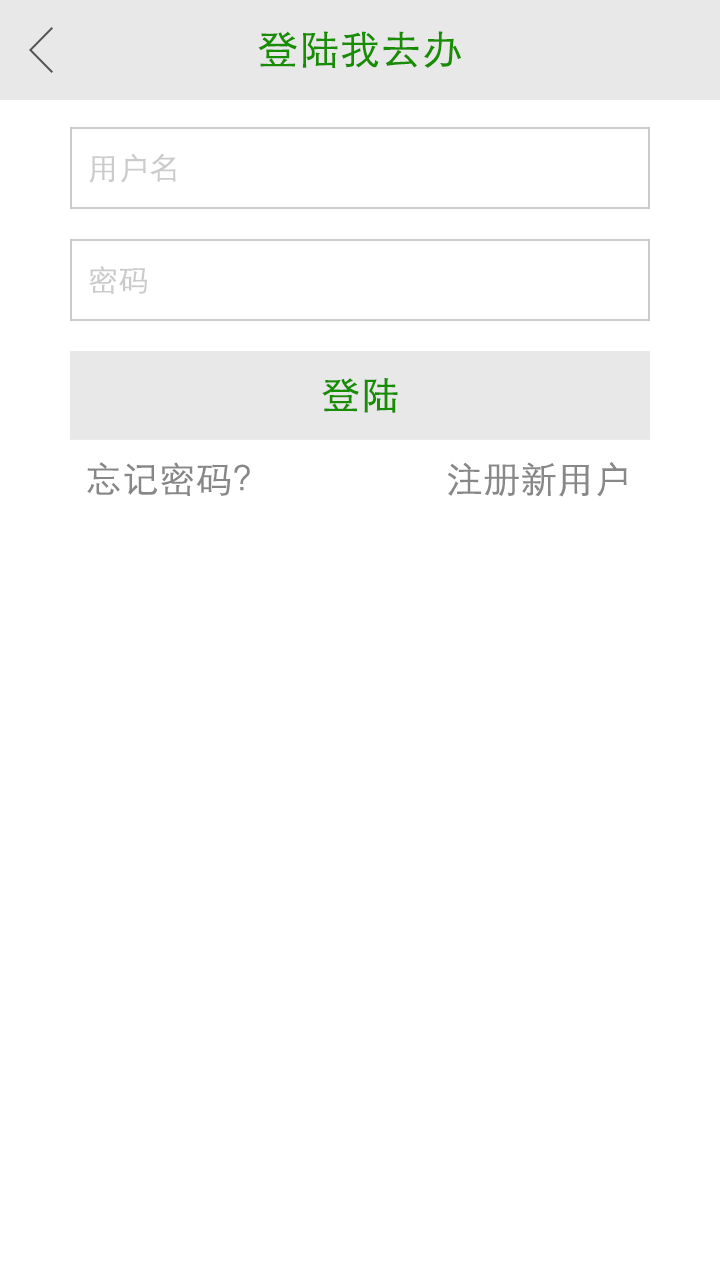
<style>
.page{position:relative;width:720px;height:1280px;background:#ffffff}
.page>*{position:absolute;margin:0}
.t1{font:40px "STXihei";color:#178d00;font-weight:bold}
.t2{font:30px "STXihei";color:#cbcbcb;font-weight:bold}
.t3{font:38px "STXihei";color:#178d00;font-weight:bold}
.t4{font:36px "STXihei";color:#878787;font-weight:bold}
.t5{font:36px "STXihei";color:#888888;font-weight:bold}
</style>
<div class="page">
<p class="t1" style="left:258px;top:31px;width:203px;height:37px">登陆我去办</p>
<p class="t2" style="left:89px;top:153px;width:87px;height:30px">用户名</p>
<p class="t2" style="left:89px;top:266px;width:58px;height:28px">密码</p>
<p class="t3" style="left:322px;top:378px;width:76px;height:35px">登陆</p>
<p class="t4" style="left:87px;top:462px;width:163px;height:34px">忘记密码？</p>
<p class="t5" style="left:448px;top:462px;width:179px;height:35px">注册新用户</p>
</div>
